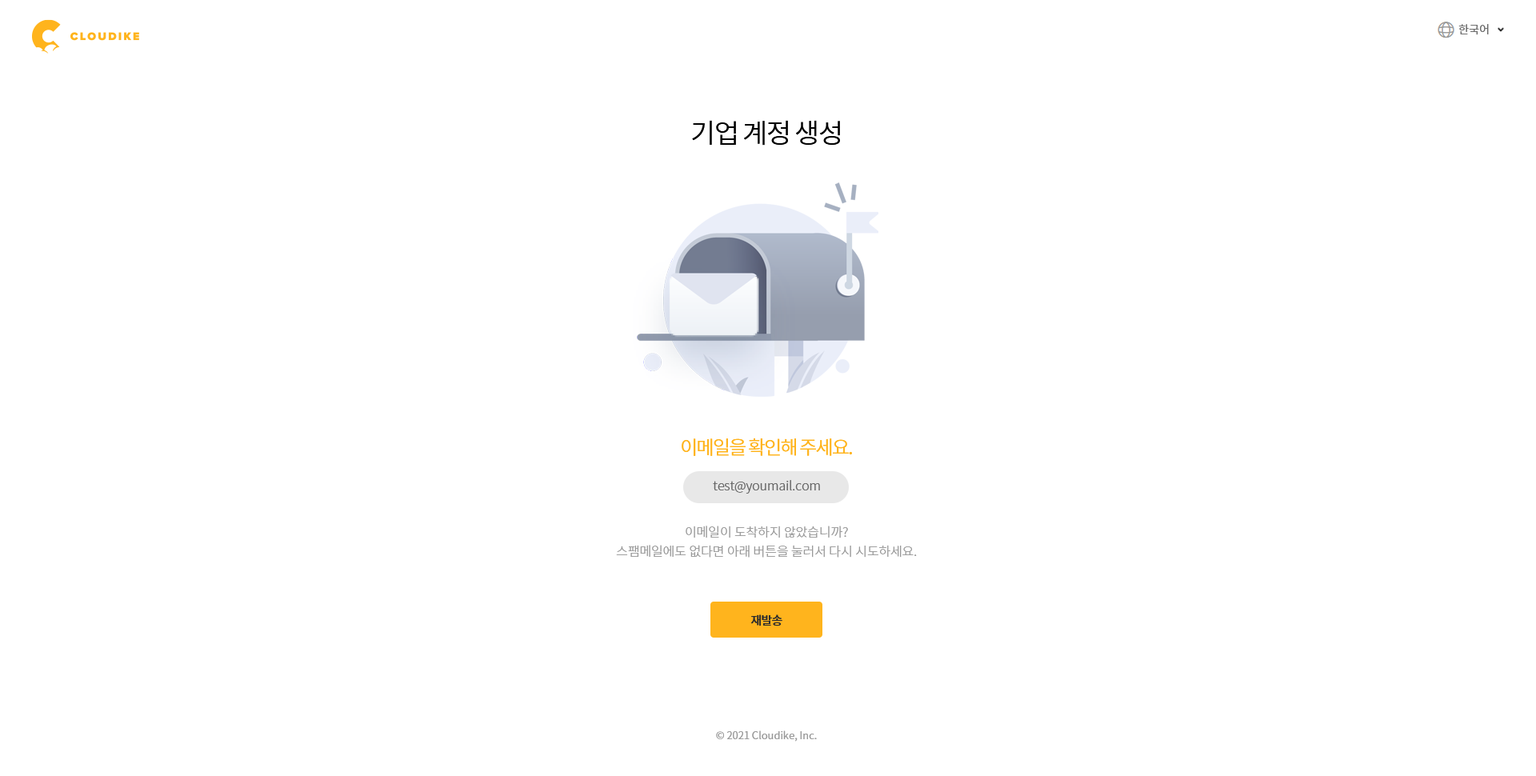
<style>
.page{position:relative;width:1536px;height:776px;background:#ffffff}
.page>*{position:absolute;margin:0}
.t1{font:11.2px "NotoSansCJKkr-DemiLight";color:#666666}
.t2{font:27.2px "NotoSansCJKkr-DemiLight";letter-spacing:-0.05em;color:#000000}
.t3{font:19.2px "NotoSansCJKkr-DemiLight";letter-spacing:-0.075em;color:#ffb41d}
.t4{font:12.8px "NotoSansCJKkr-Light";letter-spacing:-0.005em;color:#666666}
.t5{font:12.8px/19.2px "NotoSansCJKkr-Light";letter-spacing:-0.005em;color:#999999}
.t6{font:12px "NotoSansCJKkr-Medium";letter-spacing:-0.05em;color:#2d2d2d}
.t7{font:10.4px "NotoSansCJKkr-DemiLight";color:#999999}
</style>
<div class="page">
<p class="t1" style="left:1459px;top:24px;width:30px;height:11px">한국어</p>
<p class="t2" style="left:692px;top:120px;width:148px;height:26px">기업 계정 생성</p>
<p class="t3" style="left:682px;top:438px;width:170px;height:18px">이메일을 확인해 주세요.</p>
<p class="t4" style="left:713px;top:480px;width:107px;height:14px">test@youmail.com</p>
<p class="t5" style="left:616px;top:526px;width:301px;height:32px;text-align:center">이메일이 도착하지 않았습니까?<br>스팸메일에도 없다면 아래 버튼을 눌러서 다시 시도하세요.</p>
<p class="t6" style="left:751px;top:615px;width:32px;height:12px">재발송</p>
<p class="t7" style="left:716px;top:731px;width:101px;height:11px">© 2021 Cloudike, Inc.</p>
</div>
